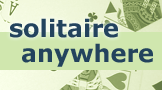
<style>
.page{position:relative;width:162px;height:90px;background:#d0e7ae}
.page>*{position:absolute;margin:0}
.t1{font:24px "Verdana-Bold";color:#23435d}
</style>
<div class="page">
<p class="t1" style="left:10px;top:18px;width:108px;height:20px">solitaire</p>
<p class="t1" style="left:22px;top:43px;width:131px;height:24px">anywhere</p>
</div>
